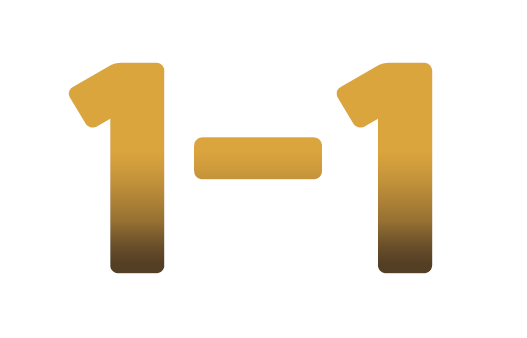
<style>
.page{position:relative;width:527px;height:338px;background:#ffffff}
.page>*{position:absolute;margin:0}
.t1{font:252.2px "TTTogether"}
</style>
<div class="page">
<p class="t1" style="left:68px;top:62px;width:365px;height:212px">1-1</p>
</div>
